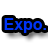
<style>
.page{position:relative;width:48px;height:48px;background:#ffffff}
.page>*{position:absolute;margin:0}
.t1{font:16px "Arial-BoldMT";color:#0034f7}
</style>
<div class="page">
<p class="t1" style="left:4px;top:18px;width:42px;height:15px">Expo.</p>
</div>
